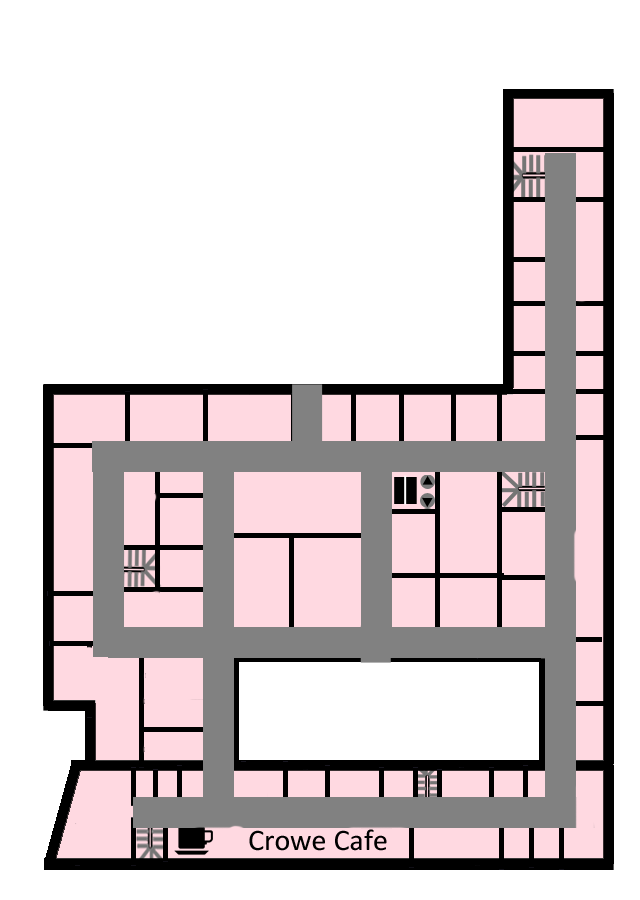
<style>
.page{position:relative;width:640px;height:900px;background:#ffffff}
.page>*{position:absolute;margin:0}
.t1{font:30px "Calibri";color:#000000}
</style>
<div class="page">
<p class="t1" style="left:249px;top:829px;width:138px;height:22px">Crowe Cafe</p>
</div>
